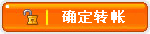
<style>
.page{position:relative;width:150px;height:34px}
.page>*{position:absolute;margin:0}
.t1{font:14px "SimSun";letter-spacing:0.1em;color:#ffffff;font-weight:bold}
</style>
<div class="page">
<p class="t1" style="left:62px;top:10px;width:63px;height:13px">确定转帐</p>
</div>
